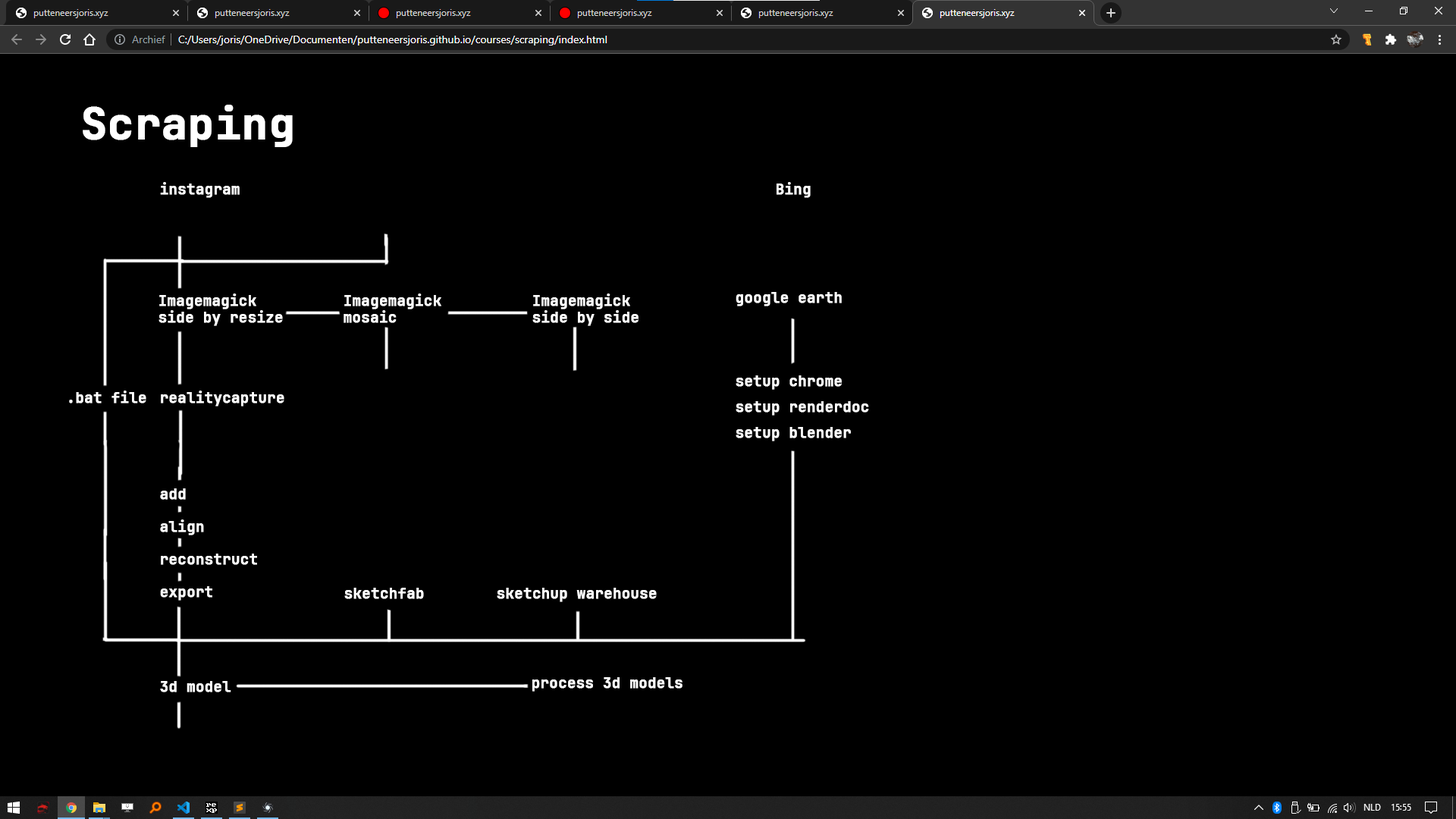
<style>
.page{position:relative;width:1456px;height:819px;background:#000000}
.page>*{position:absolute;margin:0}
.t1{font:42.9px "JetBrainsMono-Bold";color:#ffffff;font-weight:bold}
.t2{font:14.3px "JetBrainsMono-Bold";color:#ffffff;font-weight:bold}
</style>
<div class="page">
<p class="t1" style="left:83px;top:105px;width:210px;height:42px">Scraping</p>
<p class="t2" style="left:160px;top:182px;width:80px;height:16px">instagram</p>
<p class="t2" style="left:777px;top:182px;width:34px;height:16px">Bing</p>
<p class="t2" style="left:158px;top:293px;width:125px;height:33px">Imagemagick<br>side by resize</p>
<p class="t2" style="left:344px;top:293px;width:97px;height:30px">Imagemagick<br>mosaic</p>
<p class="t2" style="left:532px;top:293px;width:107px;height:33px">Imagemagick<br>side by side</p>
<p class="t2" style="left:736px;top:292px;width:106px;height:14px">google earth</p>
<p class="t2" style="left:736px;top:375px;width:106px;height:15px">setup chrome</p>
<p class="t2" style="left:69px;top:391px;width:77px;height:12px">.bat file</p>
<p class="t2" style="left:161px;top:391px;width:123px;height:15px">realitycapture</p>
<p class="t2" style="left:736px;top:401px;width:133px;height:15px">setup renderdoc</p>
<p class="t2" style="left:736px;top:427px;width:115px;height:14px">setup blender</p>
<p class="t2" style="left:160px;top:488px;width:26px;height:12px">add</p>
<p class="t2" style="left:160px;top:519px;width:44px;height:16px">align</p>
<p class="t2" style="left:161px;top:554px;width:96px;height:11px">reconstruct</p>
<p class="t2" style="left:160px;top:586px;width:52px;height:15px">export</p>
<p class="t2" style="left:344px;top:588px;width:80px;height:11px">sketchfab</p>
<p class="t2" style="left:497px;top:588px;width:160px;height:14px">sketchup warehouse</p>
<p class="t2" style="left:532px;top:677px;width:150px;height:15px">process 3d models</p>
<p class="t2" style="left:160px;top:681px;width:71px;height:11px">3d model</p>
</div>
